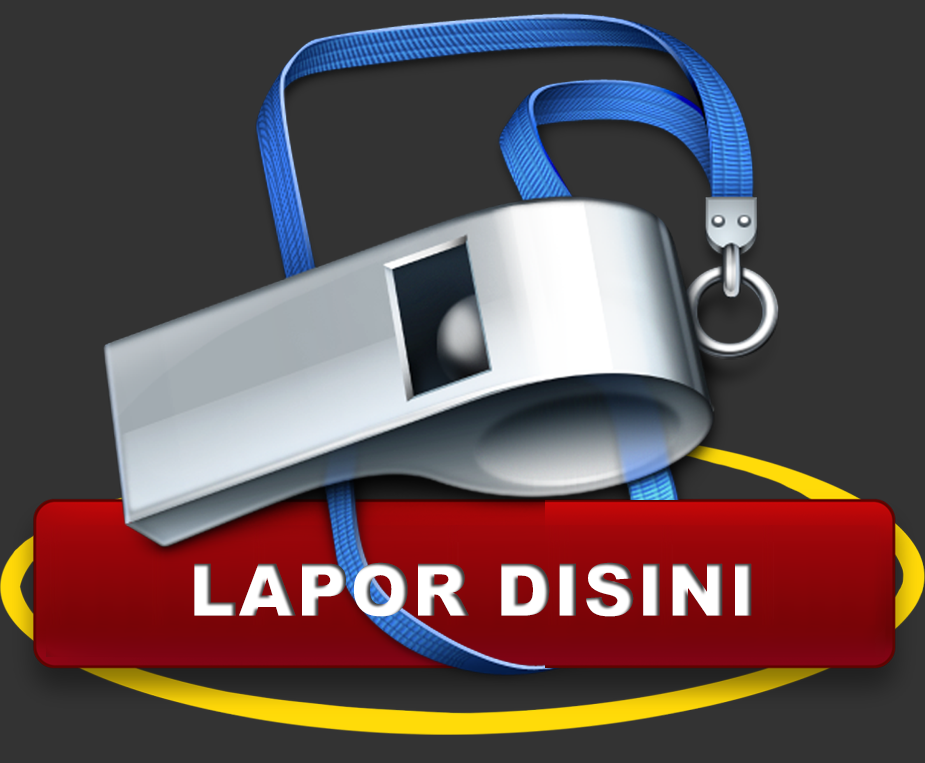
<style>
.page{position:relative;width:925px;height:763px;background:#333333}
.page>*{position:absolute;margin:0}
.t1{font:72px "Arial-Black";letter-spacing:0.025em;color:#ffffff}
</style>
<div class="page">
<p class="t1" style="left:194px;top:562px;width:558px;height:55px">LAPOR DISINI</p>
</div>
